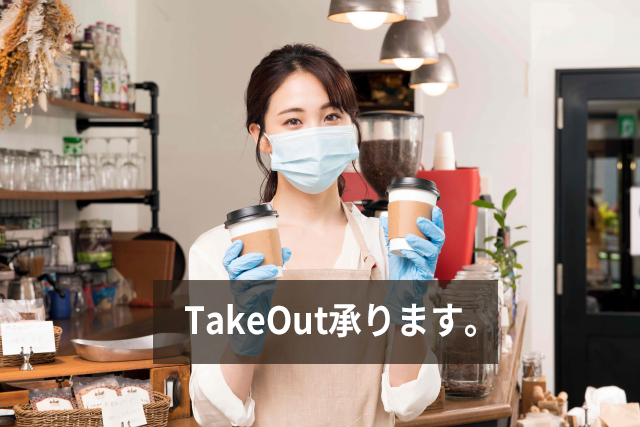
<style>
.page{position:relative;width:640px;height:427px}
.page>*{position:absolute;margin:0}
.t1{font:37.4px "NotoSansJP-Bold";color:#ffffff;scale:0.91 1}
</style>
<div class="page">
<p class="t1" style="left:185px;top:303px;width:291px;height:35px">TakeOut承ります。</p>
</div>
